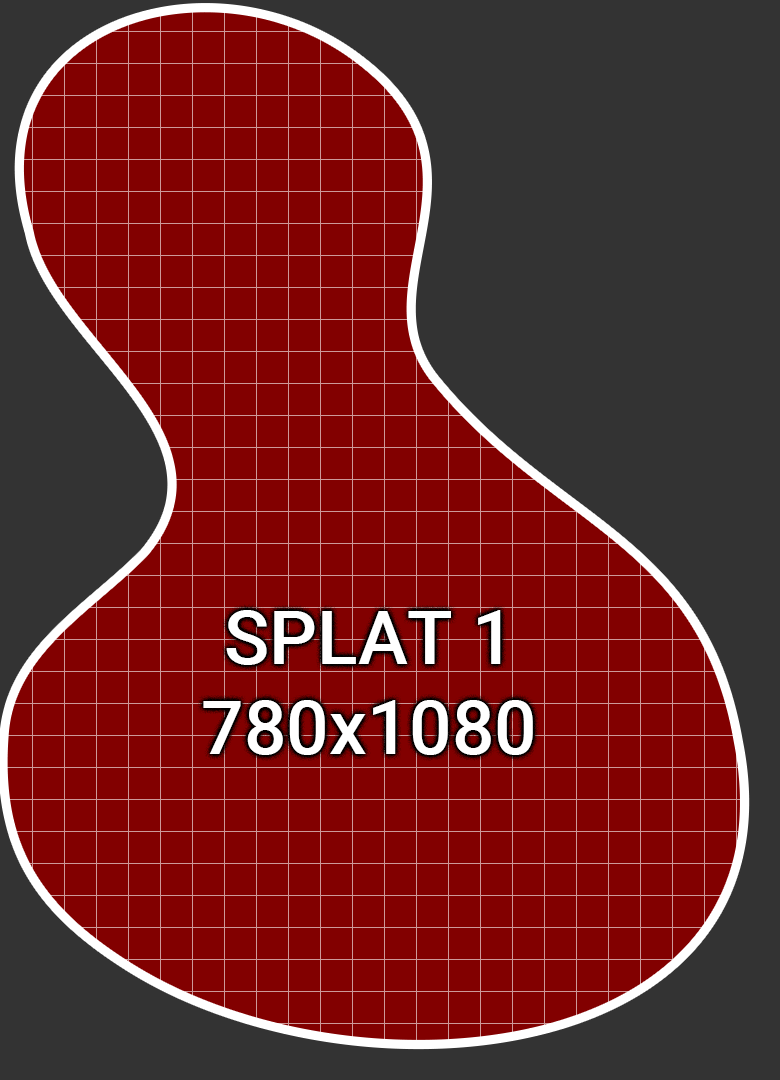
<style>
.page{position:relative;width:780px;height:1080px;background:#820000}
.page>*{position:absolute;margin:0}
.t1{font:75px "Roboto-Medium";color:#ffffff}
</style>
<div class="page">
<p class="t1" style="left:203px;top:610px;width:330px;height:145px;text-align:center">SPLAT 1<br>780x1080</p>
</div>
